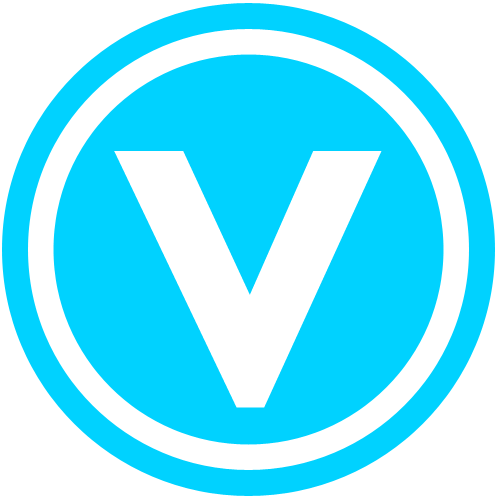
<style>
.page{position:relative;width:500px;height:500px;background:#00d2ff}
.page>*{position:absolute;margin:0}
.t1{font:371px "GillSansMT-Bold";letter-spacing:0.26em;color:#ffffff}
</style>
<div class="page">
<p class="t1" style="left:114px;top:151px;width:268px;height:257px">V</p>
</div>
